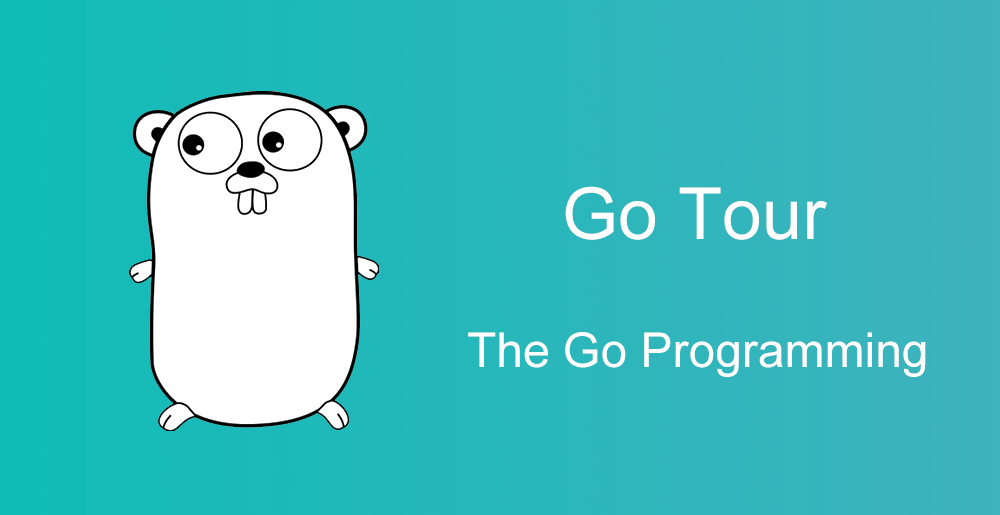
<style>
.page{position:relative;width:1000px;height:515px}
.page>*{position:absolute;margin:0}
.t1{font:72px "ArialMT";color:#ffffff}
.t2{font:48px "ArialMT";color:#ffffff}
</style>
<div class="page">
<p class="t1" style="left:565px;top:186px;width:262px;height:54px">Go Tour</p>
<p class="t2" style="left:468px;top:332px;width:458px;height:45px">The Go Programming</p>
</div>
